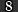
<style>
.page{position:relative;width:18px;height:12px;background:#333333}
.page>*{position:absolute;margin:0}
.t1{font:17px "Perpetua-Bold";color:#ffffff}
</style>
<div class="page">
<p class="t1" style="left:5px;top:1px;width:8px;height:10px">8</p>
</div>
